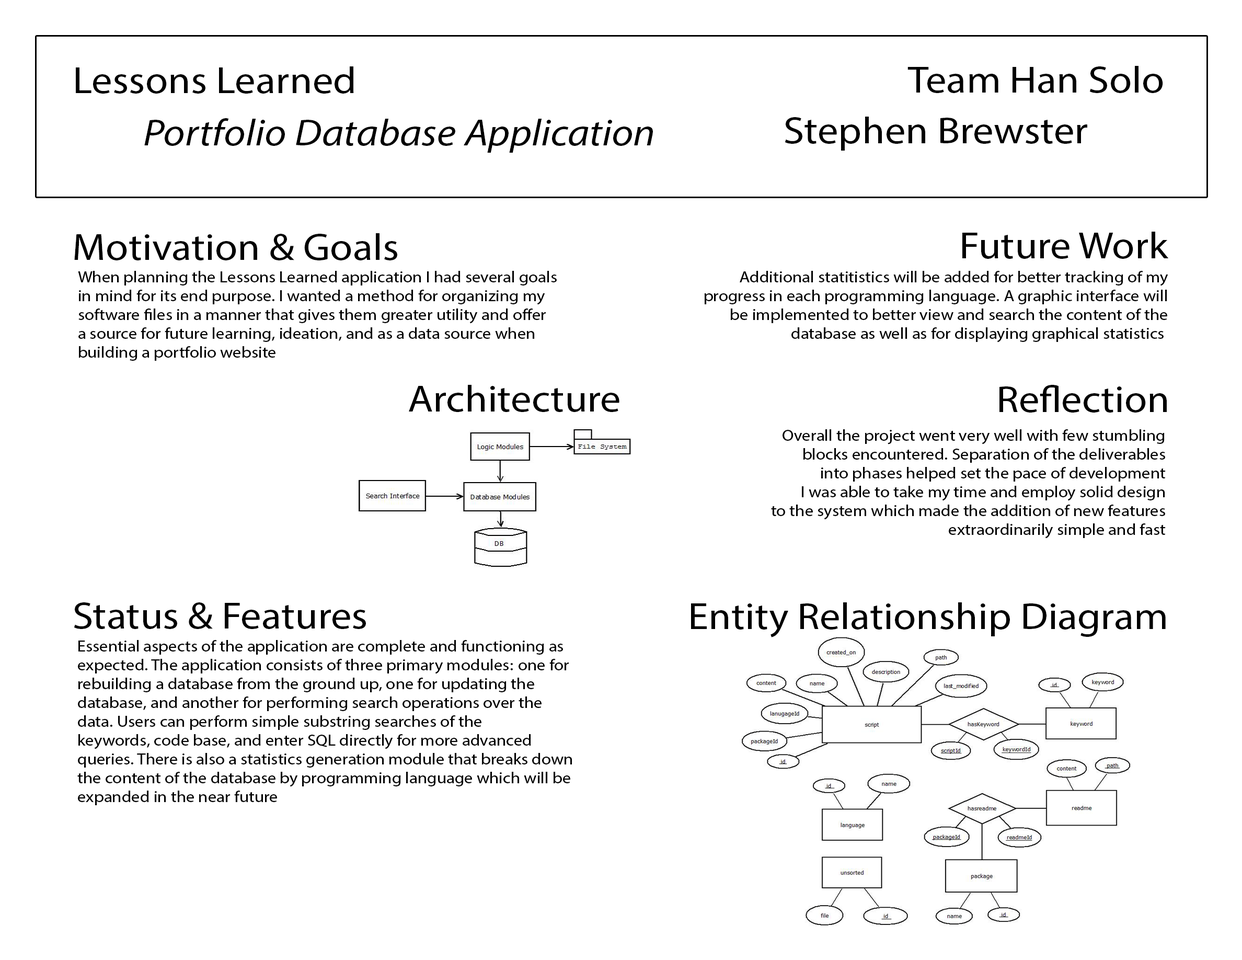
<style>
.page{position:relative;width:1242px;height:960px;background:#ffffff}
.page>*{position:absolute;margin:0}
.t1{font:37.6px "MyriadHebrew-Regular";color:#000000;scale:1.1 1}
.t2{font:37.6px "MyriadHebrew-It";color:#000000;scale:1.1 1}
.t3{font:15.7px "MyriadHebrew-Regular";color:#000000;scale:1.1 1}
</style>
<div class="page">
<p class="t1" style="left:908px;top:66px;width:255px;height:27px">Team Han Solo</p>
<p class="t1" style="left:76px;top:66px;width:278px;height:28px">Lessons Learned</p>
<p class="t2" style="left:144px;top:118px;width:509px;height:35px">Portfolio Database Application</p>
<p class="t1" style="left:785px;top:117px;width:302px;height:34px">Stephen Brewster</p>
<p class="t1" style="left:74px;top:233px;width:323px;height:27px">Motivation &amp; Goals</p>
<p class="t1" style="left:963px;top:232px;width:206px;height:27px">Future Work</p>
<p class="t3" style="left:78px;top:271px;width:479px;height:90px;text-align:right">When planning the Lessons Learned application I had several goals<br>in mind for its end purpose. I wanted a method for organizing my<br>software files in a manner that gives them greater utility and offer<br>a source for future learning, ideation, and as a data source when<br>building a portfolio website</p>
<p class="t3" style="left:704px;top:271px;width:465px;height:71px">Additional statitistics will be added for better tracking of my<br>progress in each programming language. A graphic interface will<br>be implemented to better view and search the content of the<br> database as well as for displaying graphical statistics</p>
<p class="t1" style="left:409px;top:385px;width:211px;height:27px">Architecture</p>
<p class="t1" style="left:1000px;top:385px;width:167px;height:28px">Reflection</p>
<p class="t3" style="left:771px;top:429px;width:395px;height:110px">Overall the project went very well with few stumbling<br>blocks encountered. Separation of the deliverables<br>into phases helped set the pace of development<br>I was able to take my time and employ solid design<br>to the system which made the addition of new features<br>extraordinarily simple and fast</p>
<p class="t1" style="left:74px;top:602px;width:292px;height:27px">Status &amp; Features</p>
<p class="t1" style="left:691px;top:602px;width:475px;height:35px">Entity Relationship Diagram</p>
<p class="t3" style="left:77px;top:640px;width:495px;height:165px;text-align:right">Essential aspects of the application are complete and functioning as<br>expected. The application consists of three primary modules: one for<br>rebuilding a database from the ground up, one for updating the<br>database, and another for performing search operations over the<br>data. Users can perform simple substring searches of the<br>keywords, code base, and enter SQL directly for more advanced<br>queries. There is also a statistics generation module that breaks down<br>the content of the database by programming language which will be<br>expanded in the near future</p>
</div>
